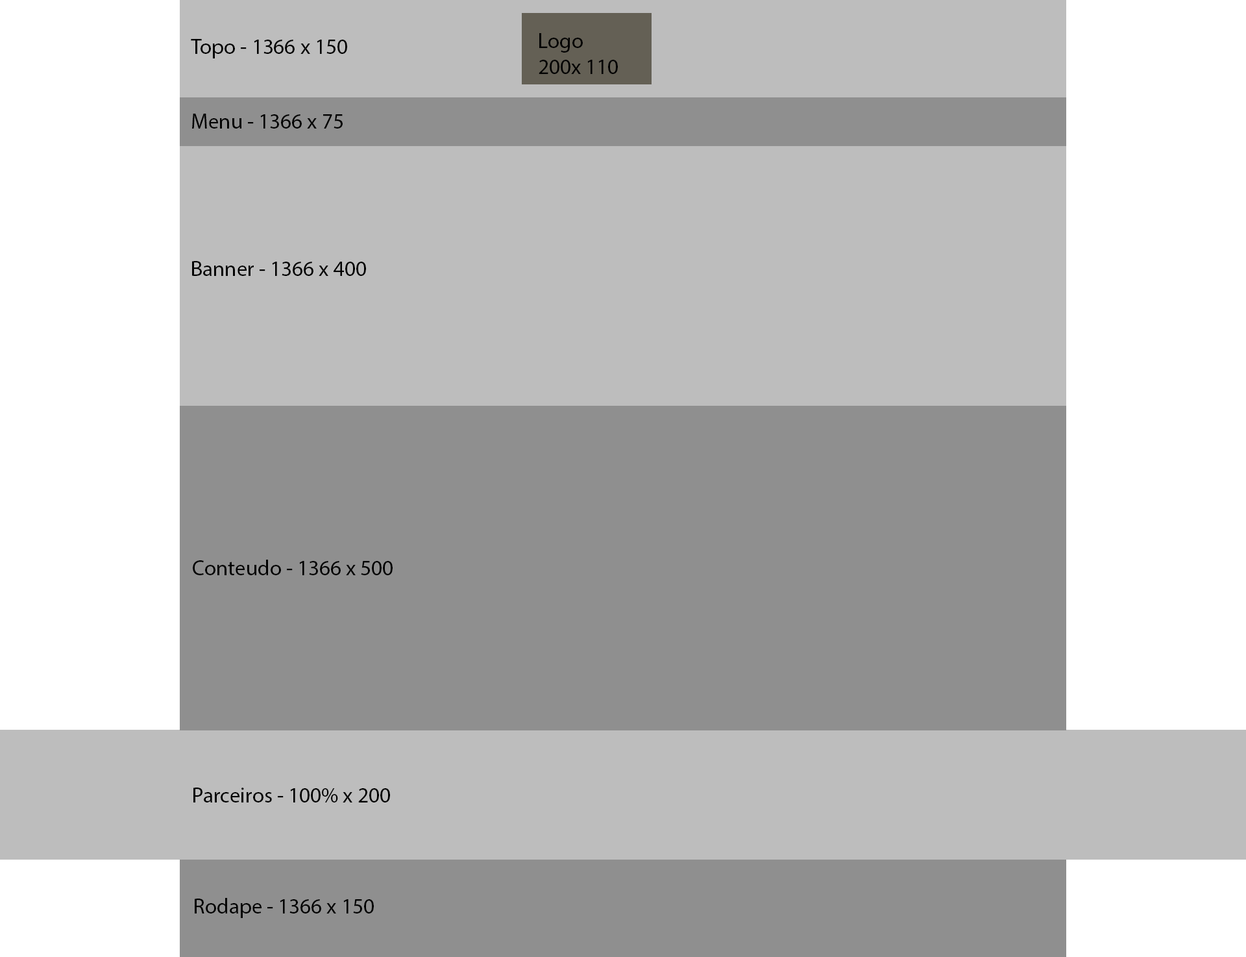
<style>
.page{position:relative;width:1246px;height:957px;background:#bdbdbd}
.page>*{position:absolute;margin:0}
.t1{font:21.5px "MyriadPro-Regular";color:#000000}
</style>
<div class="page">
<p class="t1" style="left:191px;top:39px;width:156px;height:19px">Topo - 1366 x 150</p>
<p class="t1" style="left:539px;top:33px;width:79px;height:41px">Logo<br>200x 110</p>
<p class="t1" style="left:192px;top:114px;width:151px;height:15px">Menu - 1366 x 75</p>
<p class="t1" style="left:192px;top:261px;width:174px;height:15px">Banner - 1366 x 400</p>
<p class="t1" style="left:193px;top:560px;width:200px;height:15px">Conteudo - 1366 x 500</p>
<p class="t1" style="left:193px;top:787px;width:197px;height:16px">Parceiros - 100% x 200</p>
<p class="t1" style="left:195px;top:898px;width:179px;height:20px">Rodape - 1366 x 150</p>
</div>
